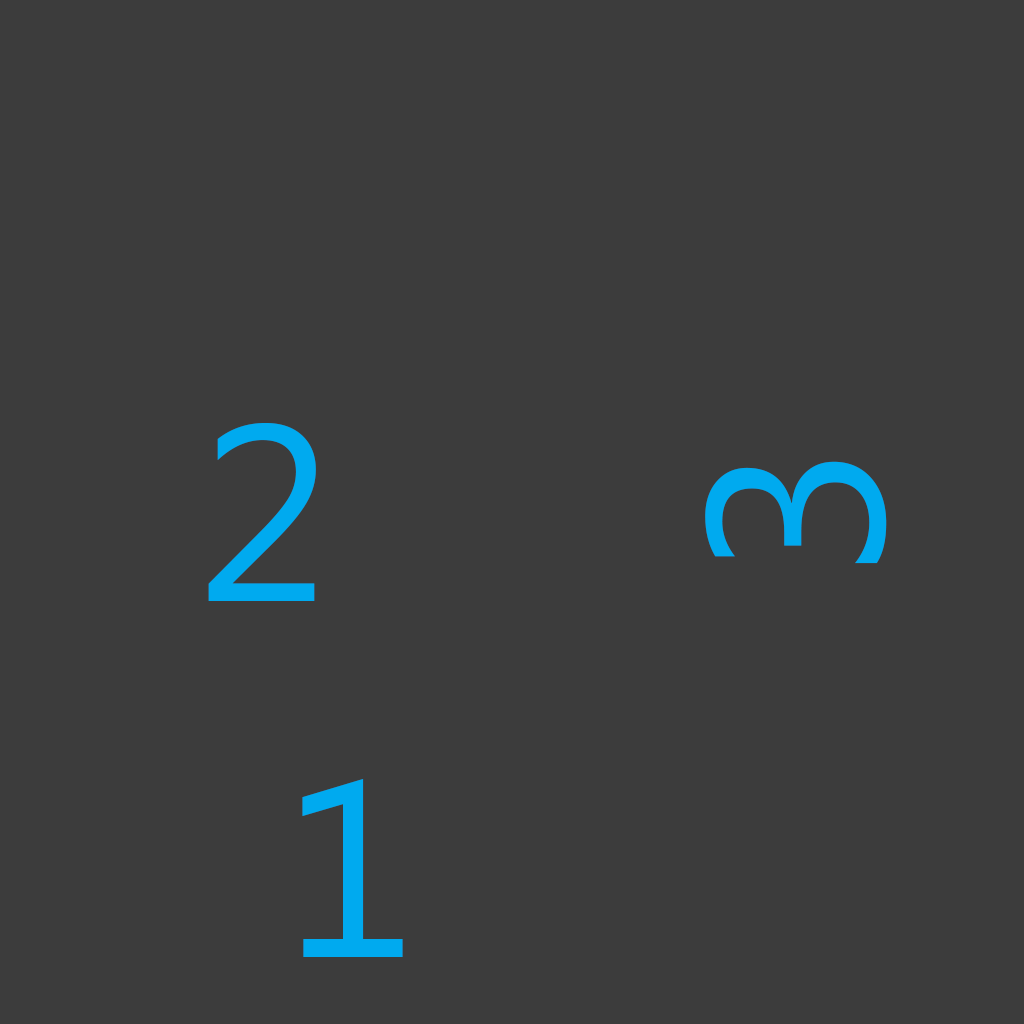
<style>
.page{position:relative;width:1024px;height:1024px;background:#3c3c3c}
.page>*{position:absolute;margin:0}
.t1{font:250px "MicrosoftNewTaiLue";letter-spacing:0.025em;color:#00aaef;text-transform:uppercase}
</style>
<div class="page">
<p class="t1" style="left:208px;top:423px;width:108px;height:178px">2</p>
<p class="t1" style="left:705px;top:461px;width:182px;height:103px;rotate:-90deg">3</p>
<p class="t1" style="left:302px;top:779px;width:101px;height:178px">1</p>
</div>
